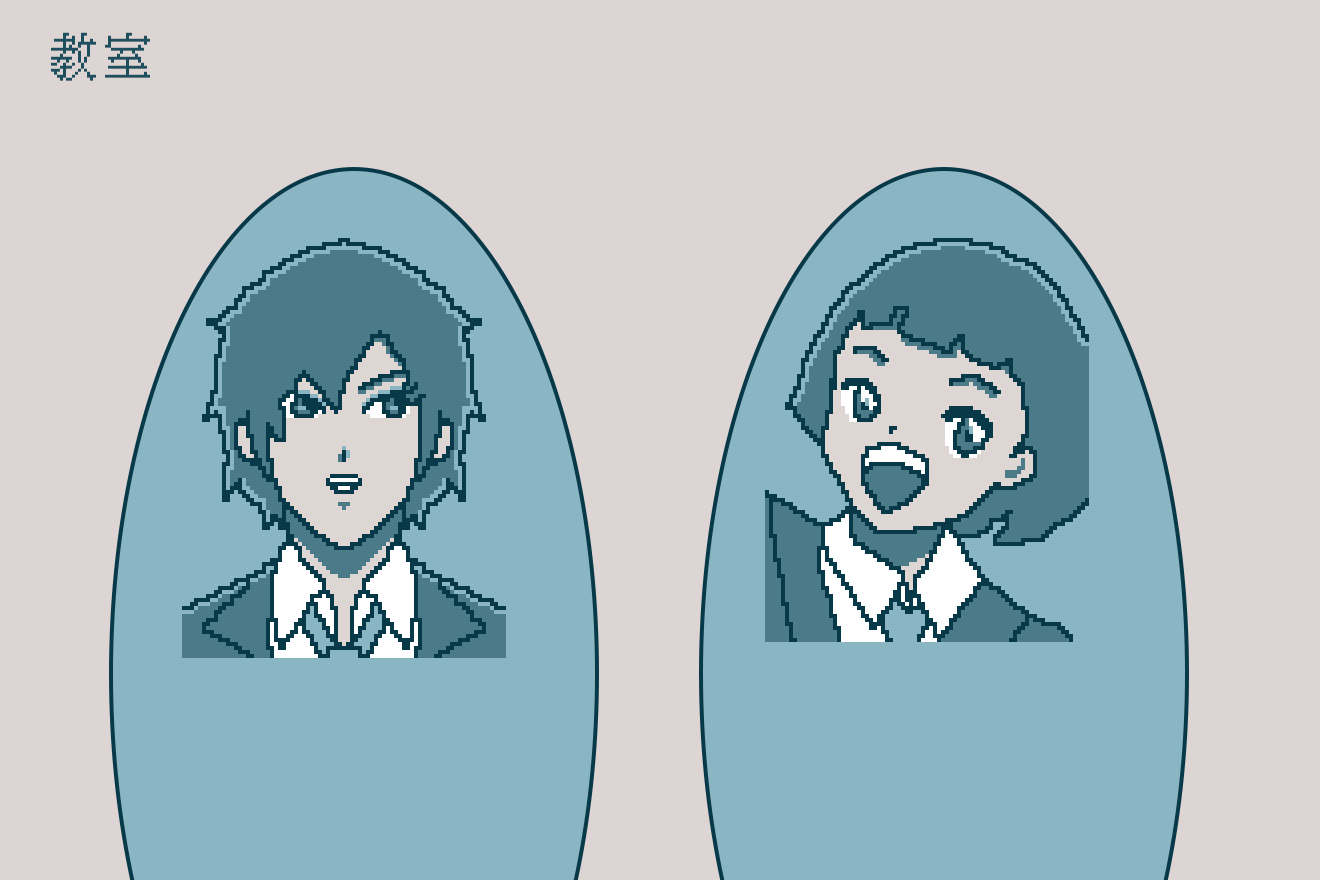
<style>
.page{position:relative;width:1320px;height:880px;background:#ddd5d3}
.page>*{position:absolute;margin:0}
.t1{font:48px "KH-Dot-kagurazaka-16";letter-spacing:0.14em;color:#1e4f5e}
</style>
<div class="page">
<p class="t1" style="left:51px;top:32px;width:99px;height:49px">教室</p>
</div>
